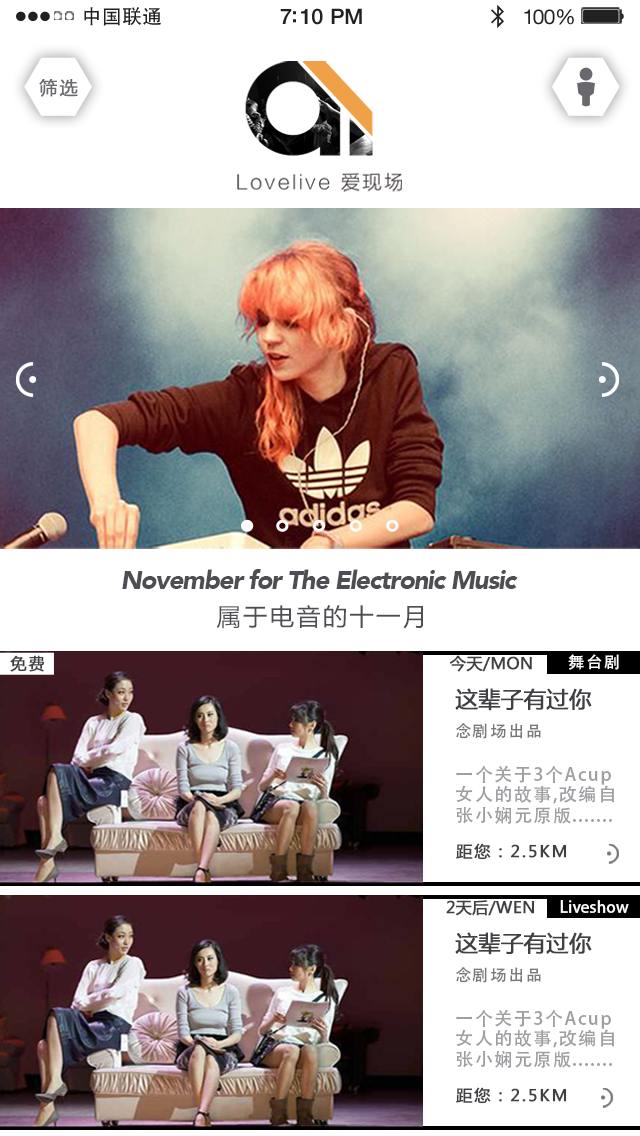
<style>
.page{position:relative;width:640px;height:1136px;background:#ffffff}
.page>*{position:absolute;margin:0}
.t1{font:19.7px "AdobeHeitiStd-Regular";letter-spacing:0.02em;color:#212121}
.t2{font:21.4px "HelveticaNeue-Medium";letter-spacing:-0.02em;color:#212121}
.t3{font:20.5px "HelveticaNeue";letter-spacing:-0.02em;color:#212121}
.t4{font:18px "MicrosoftYaHei";letter-spacing:0.1em;color:#68686e;font-weight:bold}
.t5{font:26px "Avenir-BlackOblique";letter-spacing:-0.05em;color:#4d4d53}
.t6{font:24px "MicrosoftYaHei";letter-spacing:0.1em;color:#4d4d53}
.t7{font:16px "AdobeHeitiStd-Regular";letter-spacing:0.1em;color:#ffffff}
.t8{font:16px "MicrosoftYaHei";letter-spacing:0.1em;color:#404044;font-weight:bold}
.t9{font:16px "MicrosoftYaHei";color:#404044;font-weight:bold}
.t10{font:22px "MicrosoftYaHei";color:#404044;font-weight:bold}
.t11{font:16px "AdobeHeitiStd-Regular";letter-spacing:0.1em;color:#78787a}
.t12{font:18px/20.6px "AdobeHeitiStd-Regular";letter-spacing:0.08em;color:#9f9fa3}
.t13{font:16px "AdobeHeitiStd-Regular";color:#ffffff}
</style>
<div class="page">
<p class="t1" style="left:84px;top:7px;width:77px;height:19px">中国联通</p>
<p class="t2" style="left:280px;top:8px;width:82px;height:17px">7:10 PM</p>
<p class="t3" style="left:524px;top:9px;width:50px;height:16px">100%</p>
<p class="t4" style="left:39px;top:79px;width:39px;height:18px">筛选</p>
<p class="t5" style="left:122px;top:569px;width:396px;height:20px">November for The Electronic Music</p>
<p class="t6" style="left:216px;top:605px;width:207px;height:24px">属于电音的十一月</p>
<p class="t7" style="left:568px;top:654px;width:51px;height:16px">舞台剧</p>
<p class="t8" style="left:10px;top:655px;width:35px;height:17px">免费</p>
<p class="t9" style="left:449px;top:655px;width:83px;height:17px">今天/MON</p>
<p class="t10" style="left:455px;top:688px;width:137px;height:23px">这辈子有过你</p>
<p class="t11" style="left:456px;top:723px;width:85px;height:16px">念剧场出品</p>
<p class="t12" style="left:456px;top:765px;width:158px;height:59px">一个关于3个Acup<br>女人的故事,改编自<br>张小娴元原版.......</p>
<p class="t8" style="left:456px;top:843px;width:111px;height:17px">距您：2.5KM</p>
<p class="t9" style="left:446px;top:900px;width:89px;height:16px">2天后/WEN</p>
<p class="t13" style="left:560px;top:900px;width:69px;height:13px">Liveshow</p>
<p class="t10" style="left:455px;top:932px;width:137px;height:23px">这辈子有过你</p>
<p class="t11" style="left:456px;top:967px;width:85px;height:16px">念剧场出品</p>
<p class="t12" style="left:456px;top:1009px;width:158px;height:59px">一个关于3个Acup<br>女人的故事,改编自<br>张小娴元原版.......</p>
<p class="t8" style="left:456px;top:1087px;width:111px;height:17px">距您：2.5KM</p>
</div>
